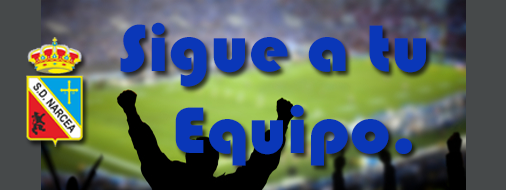
<style>
.page{position:relative;width:506px;height:190px}
.page>*{position:absolute;margin:0}
.t1{font:68.3px "Bauhaus93";color:#0a37b8;scale:1.05 1}
</style>
<div class="page">
<p class="t1" style="left:120px;top:22px;width:306px;height:144px">Sigue a tu<br>   Equipo.</p>
</div>
